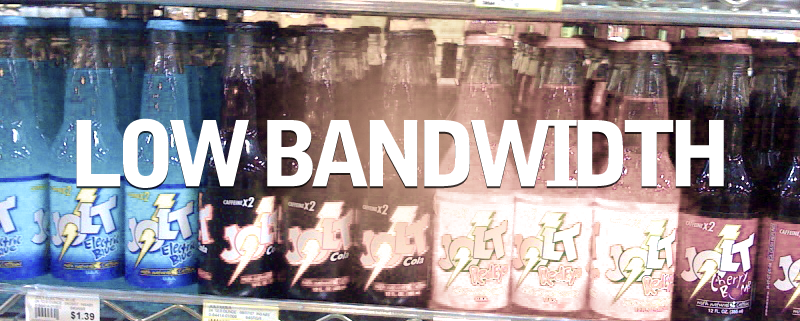
<style>
.page{position:relative;width:800px;height:321px}
.page>*{position:absolute;margin:0}
.t1{font:90.1px "BellGothicStd-Black";letter-spacing:-0.1em;color:#ffffff}
</style>
<div class="page">
<p class="t1" style="left:76px;top:118px;width:648px;height:70px">LOW BANDWIDTH</p>
</div>
